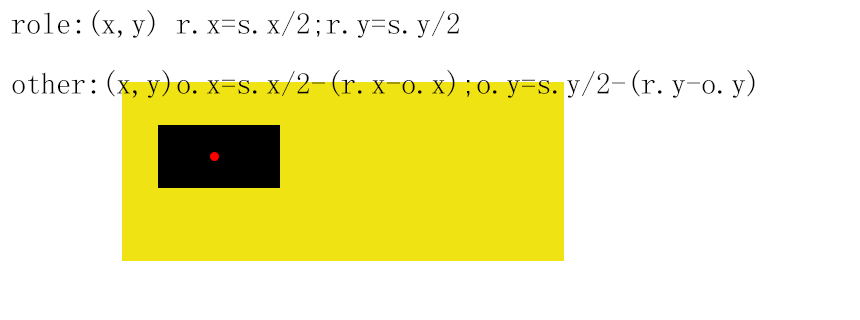
<style>
.page{position:relative;width:860px;height:320px;background:#ffffff}
.page>*{position:absolute;margin:0}
.t1{font:30px/60px "SimSun";color:#020000}
</style>
<div class="page">
<p class="t1" style="left:11px;top:9px;width:744px;height:89px">role:(x,y) r.x=s.x/2;r.y=s.y/2 <br>other:(x,y)o.x=s.x/2-(r.x-o.x);o.y=s.y/2-(r.y-o.y)</p>
</div>
